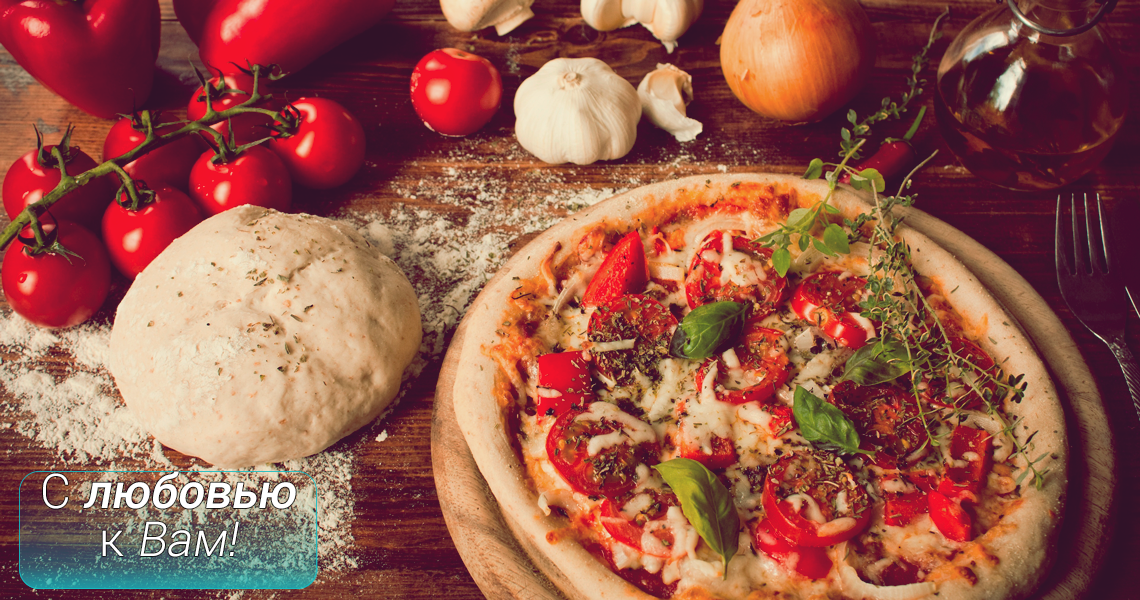
<style>
.page{position:relative;width:1140px;height:600px}
.page>*{position:absolute;margin:0}
.t1{font:48px/48px "Roboto-Medium";color:#ffffff;font-style:italic}
.t2{font:48px/48px "Roboto-Light";color:#ffffff}
.t3{font:48px/48px "Roboto-Light";color:#ffffff;font-style:italic}
</style>
<div class="page">
<p class="t1" style="left:43px;top:471px;width:253px;height:86px;text-align:center"><span class="t2">С </span>любовью<br><span class="t2">к </span><span class="t3">Вам!</span></p>
</div>
